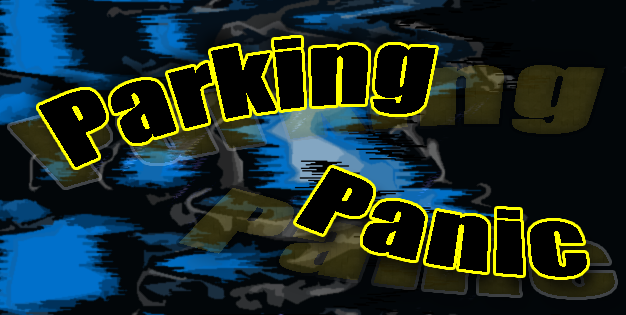
<style>
.page{position:relative;width:626px;height:315px;background:#020609}
.page>*{position:absolute;margin:0}
.t1{font:86.4px "Impact";color:#000000;scale:1.25 1}
.t2{font:79.2px "Impact";color:#000000;scale:1.36 1}
</style>
<div class="page">
<p class="t1" style="left:39px;top:38px;width:397px;height:129px;rotate:-10deg">Parking</p>
<p class="t2" style="left:296px;top:168px;width:291px;height:109px;rotate:10deg">Panic</p>
</div>
